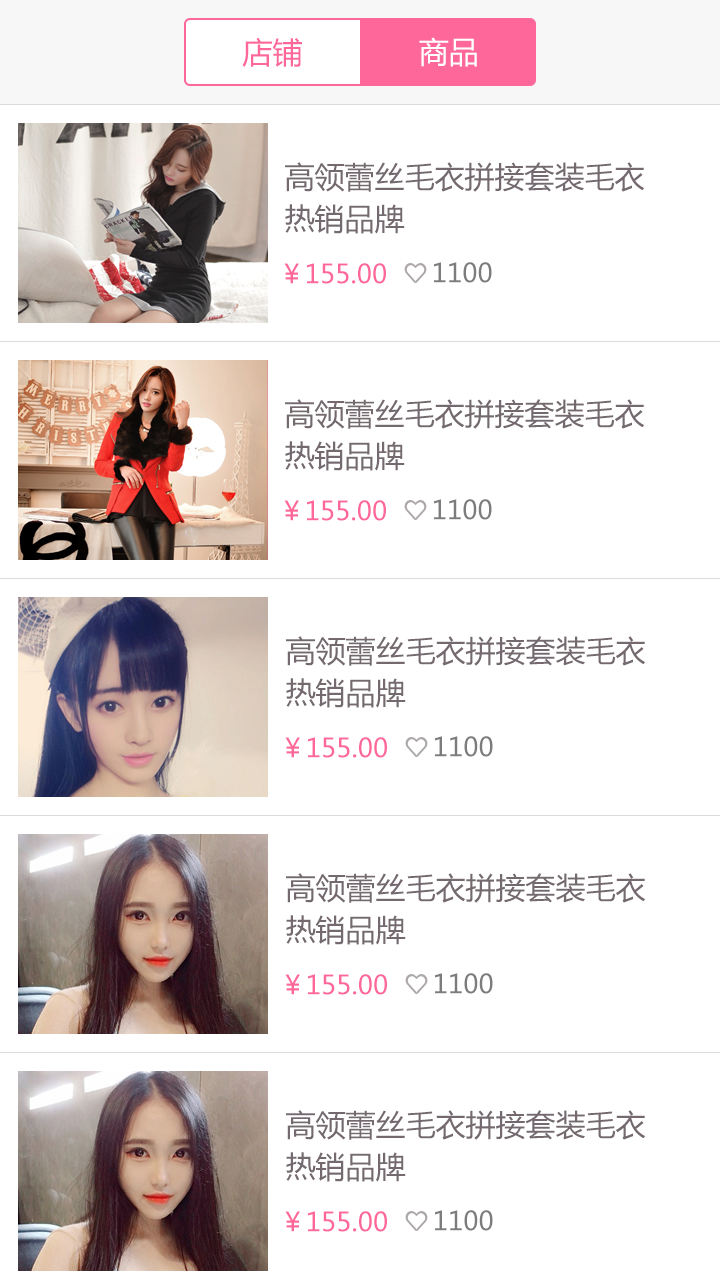
<style>
.page{position:relative;width:720px;height:1280px;background:#ffffff}
.page>*{position:absolute;margin:0}
.t1{font:30px "MicrosoftYaHei";color:#fd679a}
.t2{font:30px "MicrosoftYaHei";color:#ffffff}
.t3{font:30px/42px "MicrosoftYaHei";color:#73696f}
.t4{font:26px "MicrosoftYaHei";color:#fd679a}
.t5{font:26px "MicrosoftYaHei";color:#7d7b7c}
</style>
<div class="page">
<p class="t1" style="left:242px;top:37px;width:60px;height:30px">店铺</p>
<p class="t2" style="left:419px;top:37px;width:58px;height:30px">商品</p>
<p class="t3" style="left:285px;top:162px;width:360px;height:72px">高领蕾丝毛衣拼接套装毛衣<br>热销品牌</p>
<p class="t4" style="left:284px;top:263px;width:102px;height:21px">￥155.00</p>
<p class="t5" style="left:434px;top:262px;width:58px;height:21px">1100</p>
<p class="t3" style="left:285px;top:399px;width:360px;height:72px">高领蕾丝毛衣拼接套装毛衣<br>热销品牌</p>
<p class="t4" style="left:284px;top:500px;width:102px;height:21px">￥155.00</p>
<p class="t5" style="left:434px;top:499px;width:58px;height:21px">1100</p>
<p class="t3" style="left:286px;top:636px;width:360px;height:72px">高领蕾丝毛衣拼接套装毛衣<br>热销品牌</p>
<p class="t4" style="left:285px;top:737px;width:102px;height:21px">￥155.00</p>
<p class="t5" style="left:435px;top:736px;width:58px;height:21px">1100</p>
<p class="t3" style="left:286px;top:873px;width:360px;height:72px">高领蕾丝毛衣拼接套装毛衣<br>热销品牌</p>
<p class="t4" style="left:285px;top:974px;width:102px;height:21px">￥155.00</p>
<p class="t5" style="left:435px;top:973px;width:58px;height:21px">1100</p>
<p class="t3" style="left:286px;top:1110px;width:360px;height:72px">高领蕾丝毛衣拼接套装毛衣<br>热销品牌</p>
<p class="t4" style="left:285px;top:1211px;width:102px;height:21px">￥155.00</p>
<p class="t5" style="left:435px;top:1210px;width:58px;height:21px">1100</p>
</div>
